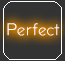
<style>
.page{position:relative;width:65px;height:61px;background:#333333}
.page>*{position:absolute;margin:0}
.t1{font:17.5px "Bryant-RegularAlt";color:#fffefe}
.t2{font:17.5px "CennerikPlain";color:#fffefe}
</style>
<div class="page">
<p class="t1" style="left:7px;top:23px;width:53px;height:13px">P<span class="t2">e</span>rf<span class="t2">ec</span>t</p>
</div>
